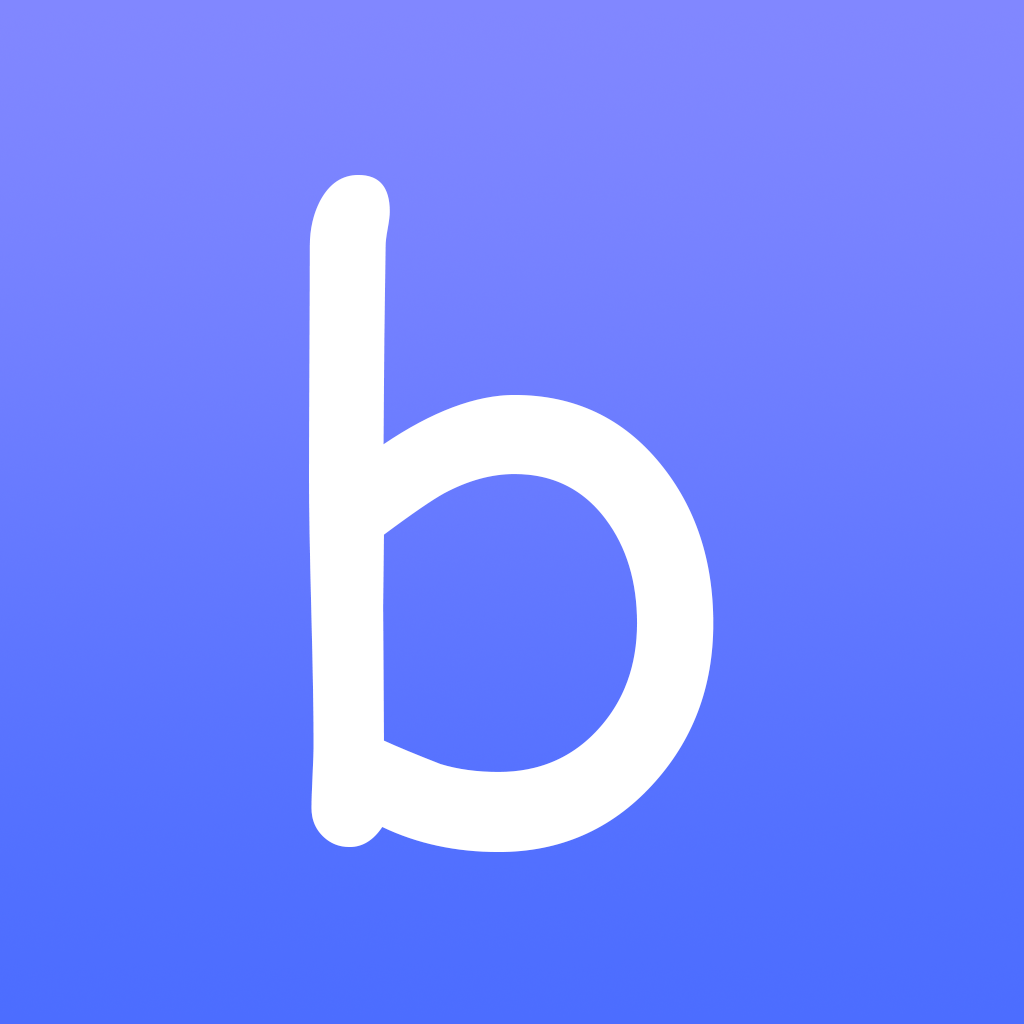
<style>
.page{position:relative;width:1024px;height:1024px}
.page>*{position:absolute;margin:0}
.t1{font:857.2px "ComicSansMS";color:#ffffff}
</style>
<div class="page">
<p class="t1" style="left:309px;top:175px;width:405px;height:677px">b</p>
</div>
